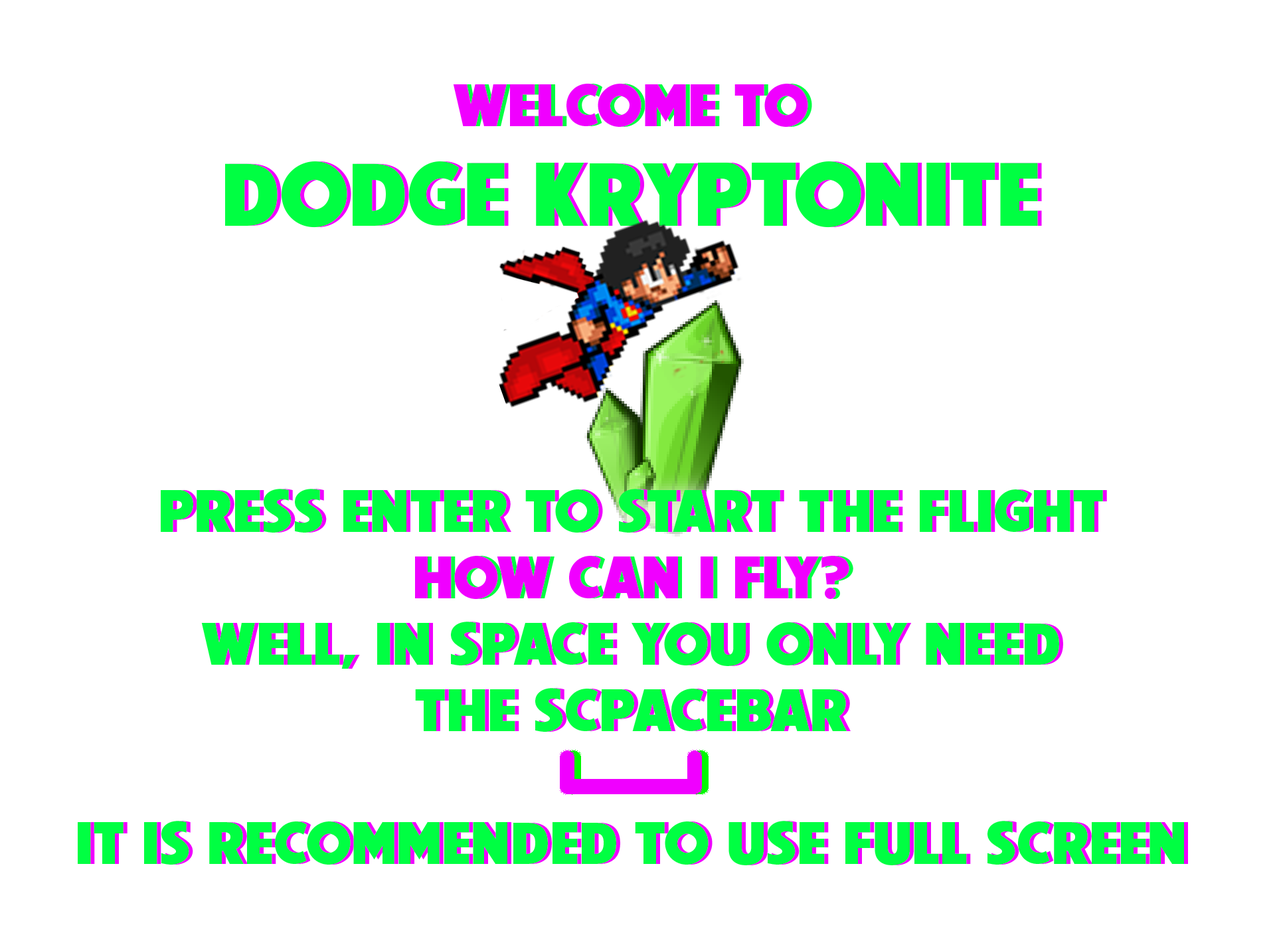
<style>
.page{position:relative;width:1275px;height:935px;background:#ffffff}
.page>*{position:absolute;margin:0}
.t1{font:55.3px "CCUpUpAndAway";color:#00ff42}
.t2{font:55.3px "CCUpUpAndAway";color:#f000ff}
.t3{font:83px "CCUpUpAndAway";color:#00ff42}
.t4{font:83px "CCUpUpAndAway";color:#f000ff}
</style>
<div class="page">
<p class="t1" style="left:78px;top:84px;width:1106px;height:781px;text-align:center"><span class="t2">WELCOME TO<br></span><span class="t3">DODGE KRYPTONITE<br><br><br><br></span>PRESS ENTER TO START THE FLIGHT<br><span class="t2">HOW CAN I FLY?<br></span>WELL, IN SPACE YOU ONLY NEED<br>THE SCPACEBAR<br><br>IT IS RECOMMENDED TO USE FULL SCREEN</p>
<p class="t2" style="left:82px;top:84px;width:1106px;height:781px;text-align:center"><span class="t1">WELCOME TO<br></span><span class="t4">DODGE KRYPTONITE<br><br><br><br></span>PRESS ENTER TO START THE FLIGHT<br><span class="t1">HOW CAN I FLY?<br></span>WELL, IN SPACE YOU ONLY NEED<br>THE SCPACEBAR<br><br>IT IS RECOMMENDED TO USE FULL SCREEN</p>
</div>
